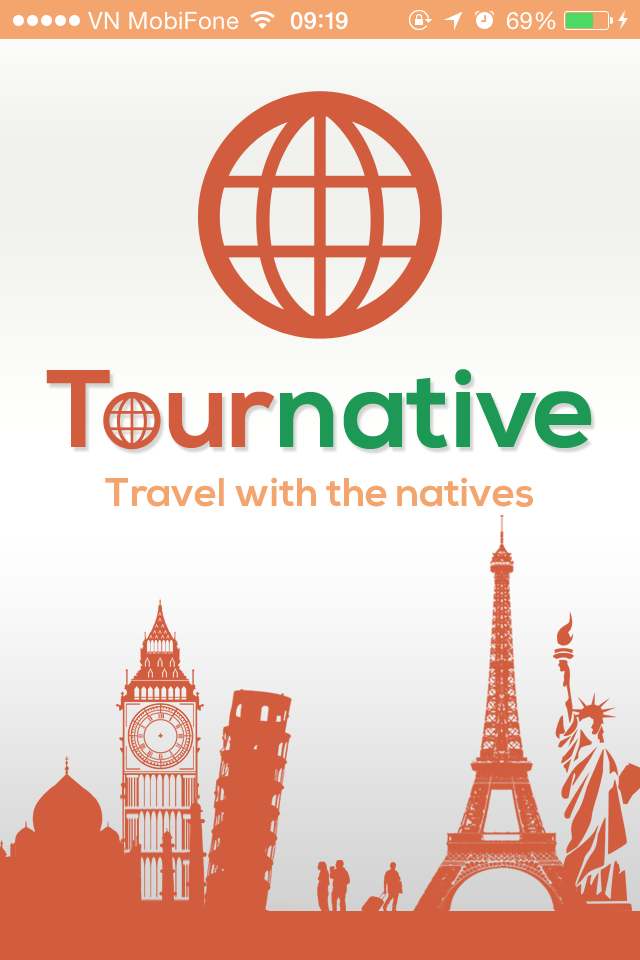
<style>
.page{position:relative;width:640px;height:960px}
.page>*{position:absolute;margin:0}
.t1{font:109.2px "NexaBold";color:#d15d3e}
.t2{font:109.2px "NexaBold";color:#1e9855}
.t3{font:40px "NexaBold";color:#f4a46d}
</style>
<div class="page">
<p class="t1" style="left:46px;top:369px;width:546px;height:80px">T   ur<span class="t2">native</span></p>
<p class="t3" style="left:105px;top:477px;width:428px;height:30px">Travel with the natives</p>
</div>
